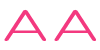
<style>
.page{position:relative;width:100px;height:50px;background:#ffffff}
.page>*{position:absolute;margin:0}
.t1{font:44.3px "Quicksand-Regular";color:#f3397f;scale:1.75 1}
</style>
<div class="page">
<p class="t1" style="left:4px;top:9px;width:92px;height:32px">AA</p>
</div>
